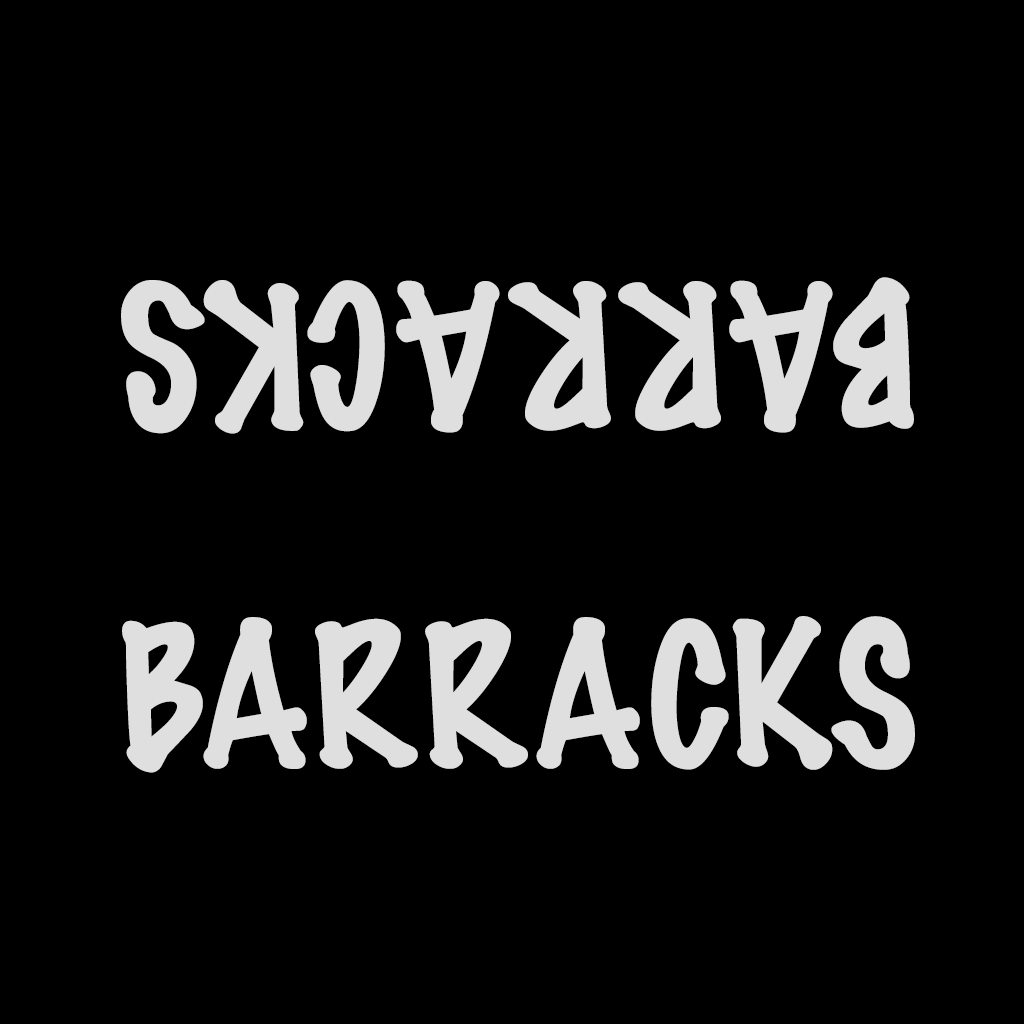
<style>
.page{position:relative;width:1024px;height:1024px;background:#000000}
.page>*{position:absolute;margin:0}
.t1{font:179.7px "MarkerFelt-Thin";color:#dfdfdf}
.t2{font:180px "MarkerFelt-Thin";color:#dfdfdf}
</style>
<div class="page">
<p class="t1" style="left:121px;top:277px;width:793px;height:157px;rotate:180deg">BARRACKS</p>
<p class="t2" style="left:122px;top:616px;width:793px;height:157px">BARRACKS</p>
</div>
